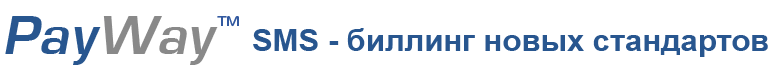
<style>
.page{position:relative;width:774px;height:75px;background:#ffffff}
.page>*{position:absolute;margin:0}
.t1{font:51.4px "EuropeDemiItalic";color:#28568f}
.t2{font:51.4px "EuropeDemiItalic";color:#898989}
.t3{font:13.2px "MagistralC-Bold";color:#335aa0}
.t4{font:31px "Arial-BoldMT";color:#28568f}
</style>
<div class="page">
<p class="t1" style="left:5px;top:16px;width:213px;height:49px">Pay<span class="t2">Way</span></p>
<p class="t3" style="left:217px;top:16px;width:22px;height:11px">TM</p>
<p class="t4" style="left:253px;top:28px;width:515px;height:29px">SMS - биллинг новых стандартов</p>
</div>
